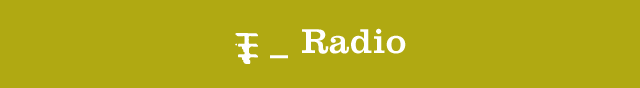
<style>
.page{position:relative;width:640px;height:88px;background:#b0a912}
.page>*{position:absolute;margin:0}
.t1{font:36px "Clarendon";letter-spacing:0.02em;color:#ffffff}
.t2{font:36px "Freeform-Two";letter-spacing:0.02em;color:#ffffff}
</style>
<div class="page">
<p class="t1" style="left:235px;top:28px;width:171px;height:36px"><span class="t2">t</span> _ Radio</p>
</div>
